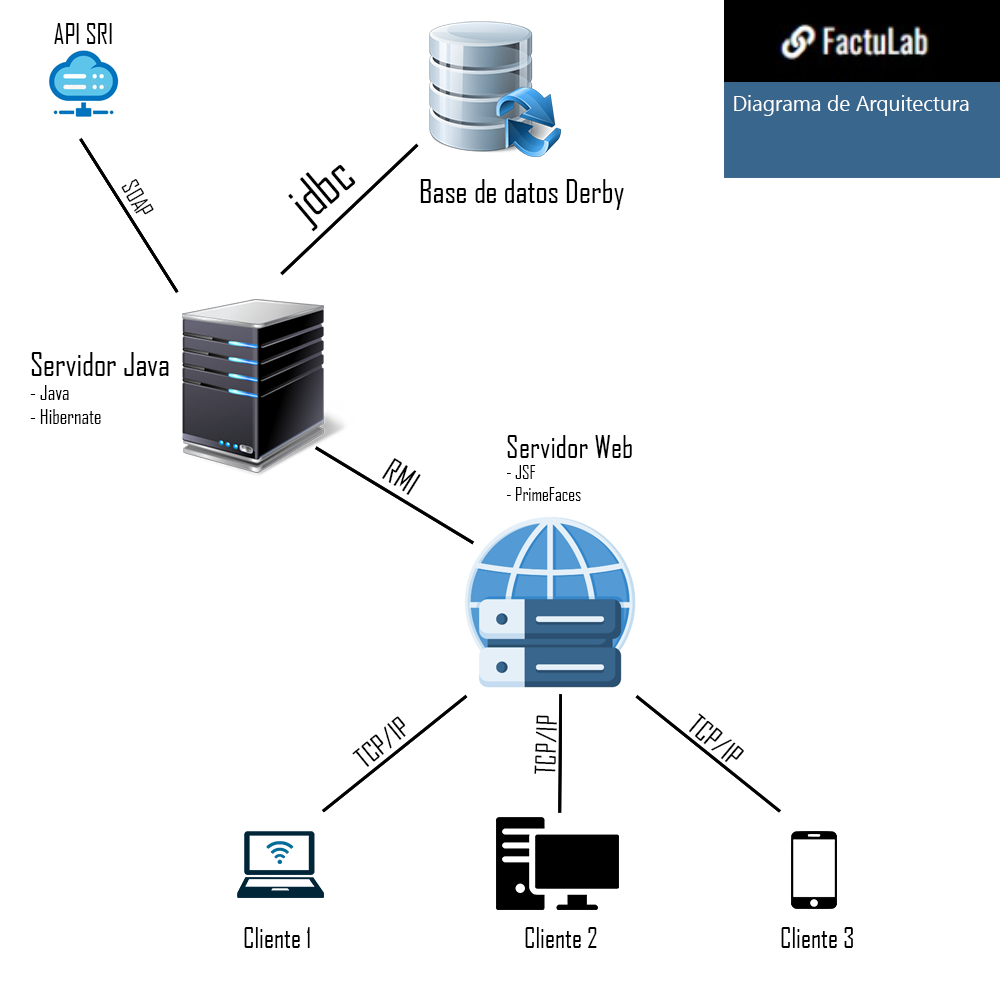
<style>
.page{position:relative;width:1000px;height:1000px;background:#ffffff}
.page>*{position:absolute;margin:0}
.t1{font:26.5px "AgencyFB-Reg";color:#000000}
.t2{font:51.7px "AgencyFB-Reg";color:#000000}
.t3{font:22.9px "AgencyFB-Reg";color:#000000}
.t4{font:31.7px "AgencyFB-Reg";color:#000000}
.t5{font:20px "AgencyFB-Reg";color:#000000}
.t6{font:18px "AgencyFB-Reg";color:#000000}
.t7{font:30.1px "AgencyFB-Reg";color:#000000}
.t8{font:31.1px "AgencyFB-Reg";color:#000000}
.t9{font:26.9px "AgencyFB-Reg";color:#000000}
.t10{font:26.8px "AgencyFB-Reg";color:#000000}
</style>
<div class="page">
<p class="t1" style="left:54px;top:23px;width:58px;height:21px">API SRI</p>
<p class="t2" style="left:288px;top:165px;width:68px;height:67px;rotate:-40deg">jdbc</p>
<p class="t3" style="left:121px;top:179px;width:33px;height:36px;rotate:60deg">SOAP</p>
<p class="t4" style="left:420px;top:179px;width:204px;height:31px">Base de datos Derby</p>
<p class="t5" style="left:30px;top:352px;width:139px;height:72px"><span class="t4">Servidor Java<br></span>- Java<br>- Hibernate</p>
<p class="t6" style="left:507px;top:435px;width:125px;height:66px"><span class="t7">Servidor Web<br></span>- JSF<br>- PrimeFaces</p>
<p class="t8" style="left:382px;top:458px;width:39px;height:37px;rotate:32deg">RMI</p>
<p class="t9" style="left:688px;top:713px;width:56px;height:50px;rotate:40deg">TCP/IP</p>
<p class="t9" style="left:352px;top:716px;width:54px;height:51px;rotate:-39deg">TCP/IP</p>
<p class="t9" style="left:534px;top:715px;width:23px;height:59px;rotate:-88deg">TCP/IP</p>
<p class="t10" style="left:244px;top:927px;width:66px;height:21px">Cliente 1</p>
<p class="t10" style="left:525px;top:927px;width:72px;height:21px">Cliente 2</p>
<p class="t10" style="left:781px;top:927px;width:72px;height:21px">Cliente 3</p>
</div>
